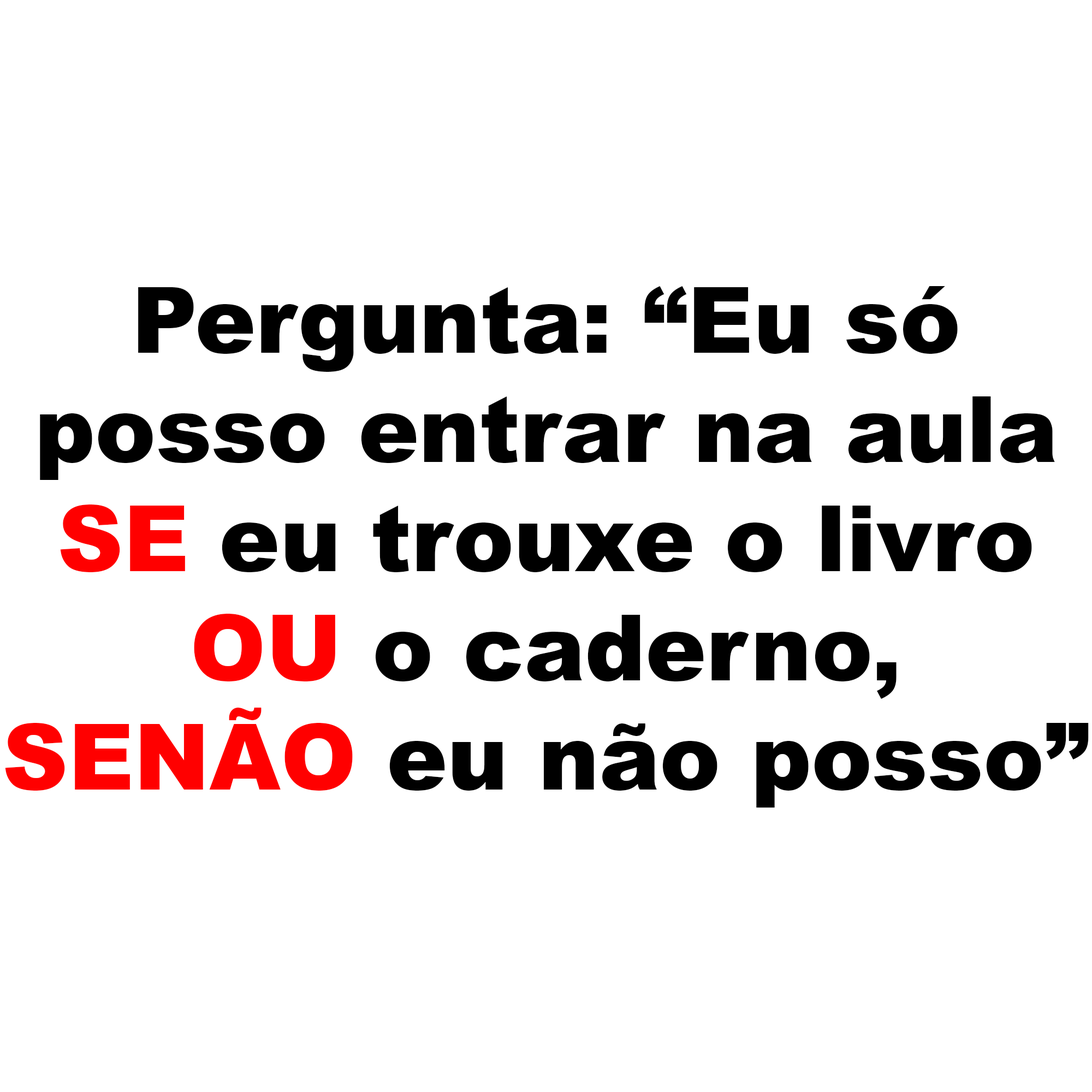
<style>
.page{position:relative;width:1092px;height:1092px;background:#ffffff}
.page>*{position:absolute;margin:0}
.t1{font:91px "Arial-Black";color:#000000}
.t2{font:91px "Arial-Black";color:#ff0000}
</style>
<div class="page">
<p class="t1" style="left:5px;top:286px;width:1084px;height:522px;text-align:center">Pergunta: “Eu só<br>posso entrar na aula<br><span class="t2">SE</span> eu trouxe o livro<br><span class="t2">OU</span> o caderno,<br><span class="t2">SENÃO</span> eu não posso”</p>
</div>
